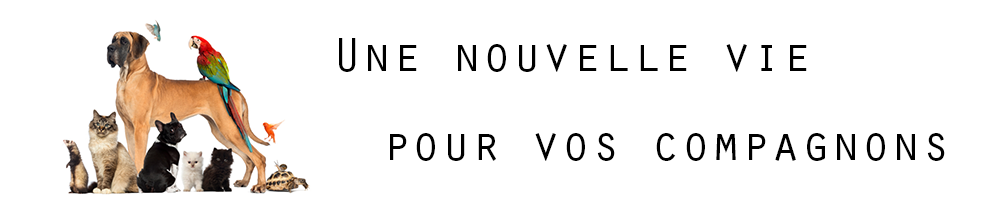
<style>
.page{position:relative;width:1000px;height:200px;background:#ffffff}
.page>*{position:absolute;margin:0}
.t1{font:12px/66.7px "OratorStd";color:#000000}
</style>
<div class="page">
<p class="t1" style="left:339px;top:38px;width:468px;height:34px">Une nouvelle vie</p>
<p class="t1" style="left:390px;top:133px;width:555px;height:28px">pour vos compagnons</p>
</div>
